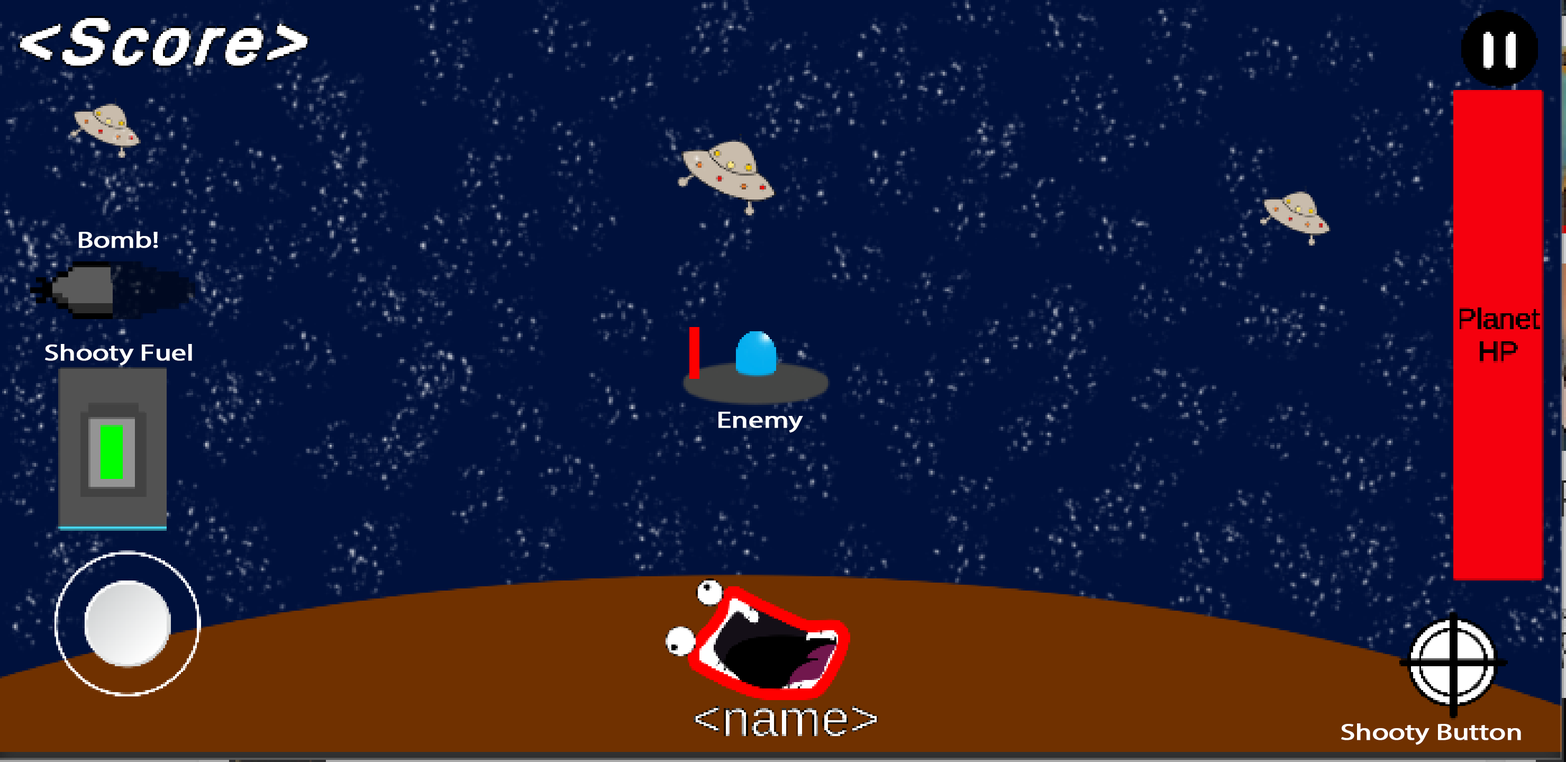
<style>
.page{position:relative;width:1566px;height:762px;background:#00113c}
.page>*{position:absolute;margin:0}
.t1{font:23px "MyriadPro-Regular";letter-spacing:-0.02em;color:#ffffff;font-weight:bold;scale:1.3 1}
</style>
<div class="page">
<p class="t1" style="left:79px;top:231px;width:79px;height:17px">Bomb!</p>
<p class="t1" style="left:45px;top:344px;width:147px;height:21px">Shooty Fuel</p>
<p class="t1" style="left:718px;top:411px;width:85px;height:22px">Enemy</p>
<p class="t1" style="left:1341px;top:723px;width:180px;height:22px">Shooty Button</p>
</div>
